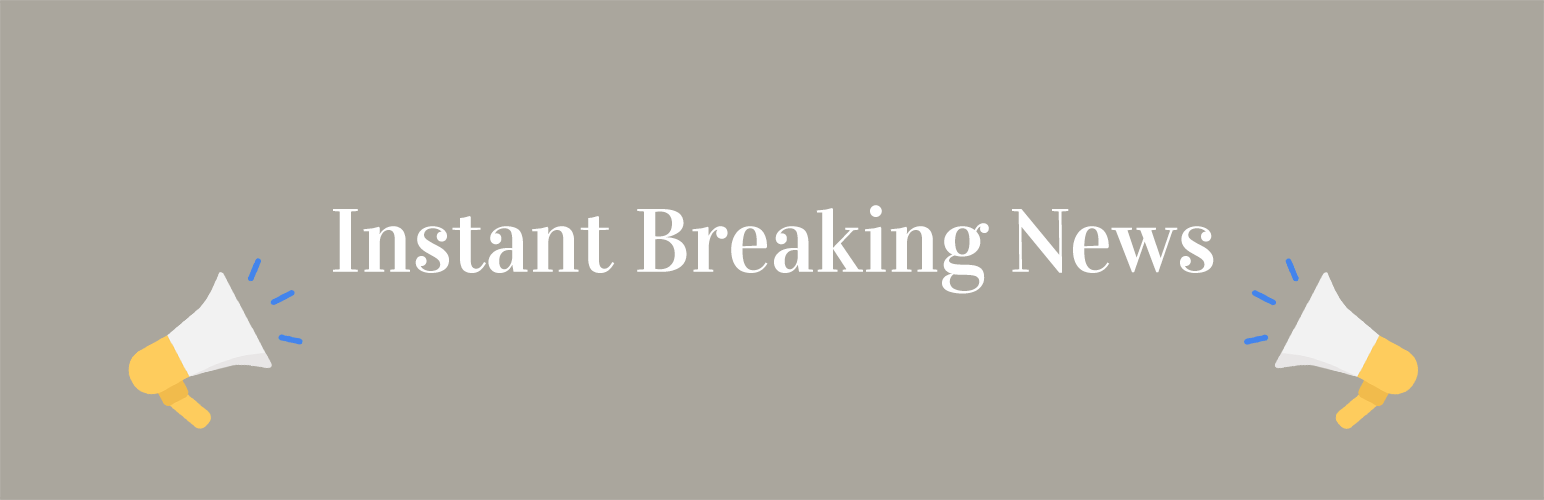
<style>
.page{position:relative;width:1544px;height:500px;background:#aaa69d}
.page>*{position:absolute;margin:0}
.t1{font:90px "Vidaloka-Regular";color:#ffffff}
</style>
<div class="page">
<p class="t1" style="left:333px;top:205px;width:881px;height:89px">Instant Breaking News</p>
</div>
